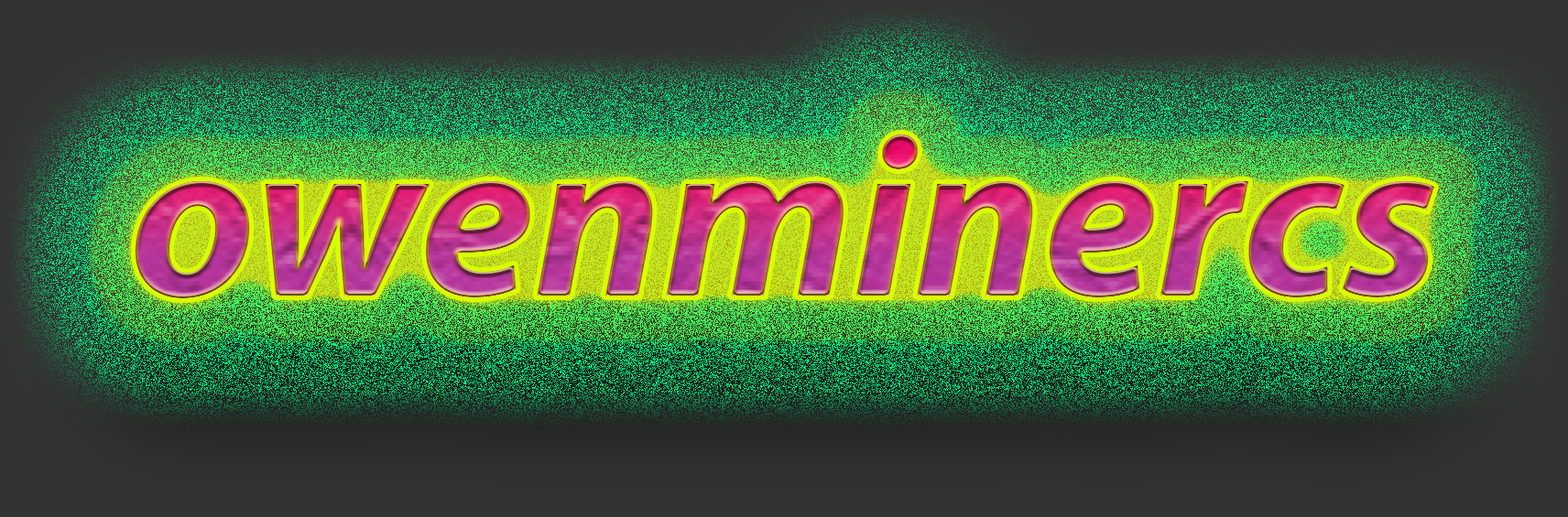
<style>
.page{position:relative;width:1568px;height:517px}
.page>*{position:absolute;margin:0}
.t1{font:229px "MyriadPro-BoldIt"}
</style>
<div class="page">
<p class="t1" style="left:135px;top:135px;width:1299px;height:164px">owenminercs</p>
</div>
